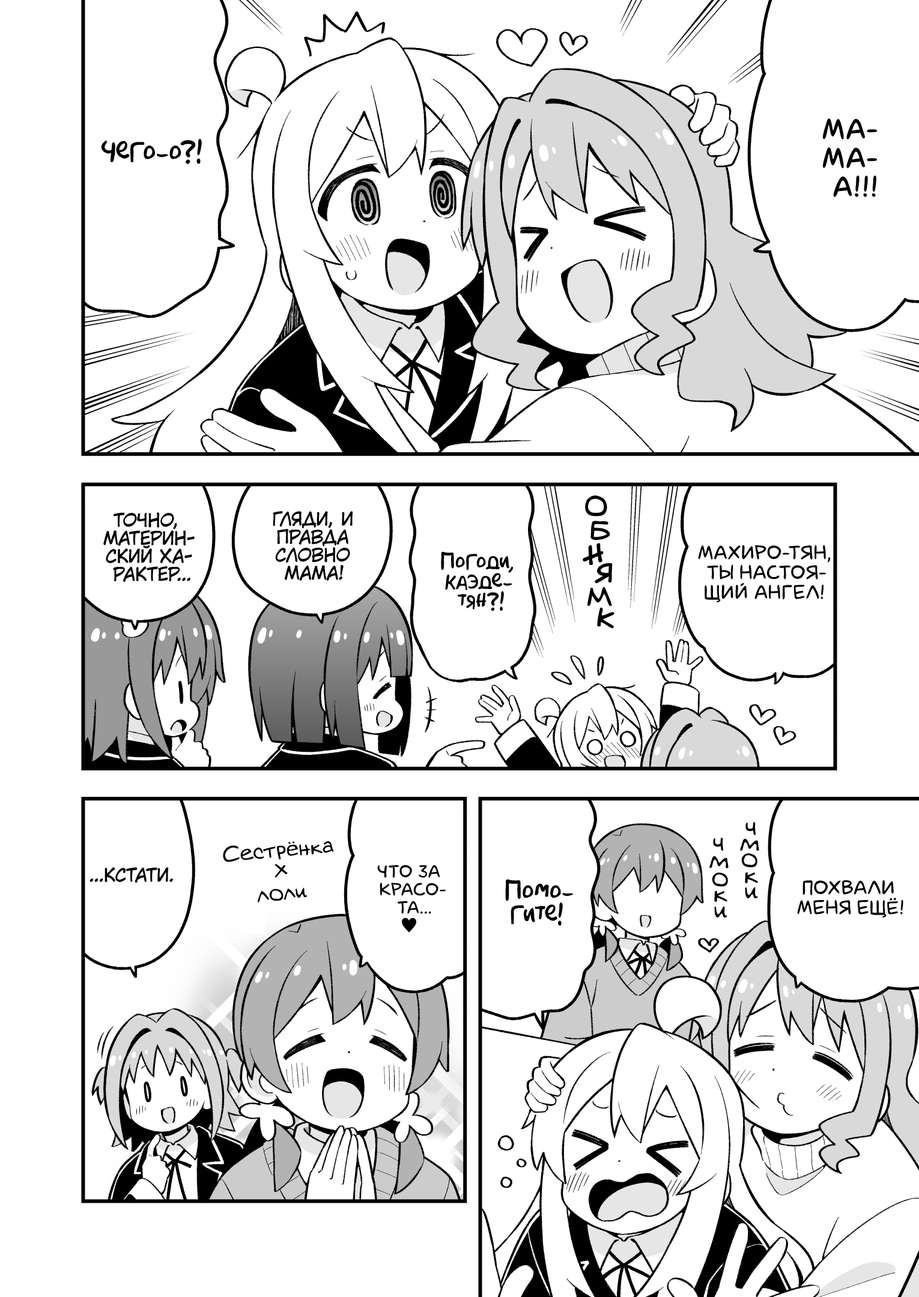
<style>
.page{position:relative;width:919px;height:1297px;background:#ffffff}
.page>*{position:absolute;margin:0}
.t1{font:28.8px "laCartoonerie";color:#000000;text-transform:uppercase;font-weight:bold}
.t2{font:25.2px "AkbarPlain";color:#000000}
.t3{font:25.2px "v_Augie";color:#000000;text-transform:uppercase}
.t4{font:18px "KuraiVoice2";color:#000000;text-transform:uppercase}
.t5{font:24px "v_Augie";color:#000000;text-transform:uppercase}
.t6{font:25.8px "v_Augie";color:#000000;text-transform:uppercase}
.t7{font:19.8px "laCartoonerie";color:#000000;text-transform:uppercase}
.t8{font:19.8px "AkbarPlain";color:#000000}
.t9{font:26.4px "v_Augie";color:#000000;text-transform:uppercase}
.t10{font:25.2px "v_Augie";color:#000000}
.t11{font:21.6px "v_Augie";color:#000000}
.t12{font:18px "laCartoonerie";color:#000000;text-transform:uppercase}
.t13{font:18px "KozGoPr6N-Regular";color:#000000;text-transform:uppercase}
.t14{font:23.4px "AkbarPlain";color:#000000}
</style>
<div class="page">
<p class="t1" style="left:823px;top:118px;width:54px;height:79px;text-align:center">Ма-<br>ма-<br>а!!!</p>
<p class="t2" style="left:101px;top:139px;width:101px;height:26px">Чего-о?!</p>
<p class="t3" style="left:586px;top:496px;width:21px;height:20px">о</p>
<p class="t4" style="left:103px;top:512px;width:92px;height:70px;text-align:center">Точно,<br>материн-<br>ский ха-<br>рактер...</p>
<p class="t4" style="left:273px;top:511px;width:80px;height:70px;text-align:center">Гляди, и<br>правда<br>словно<br>мама!</p>
<p class="t5" style="left:591px;top:521px;width:19px;height:19px;rotate:4deg">б</p>
<p class="t6" style="left:583px;top:544px;width:20px;height:21px;rotate:-6deg">н</p>
<p class="t7" style="left:698px;top:545px;width:133px;height:57px;text-align:center">Махиро-тян,<br>ты настоя-<br>щий ангел!</p>
<p class="t8" style="left:441px;top:552px;width:72px;height:59px;text-align:center">Погоди,<br>Каэде-<br>тян?!</p>
<p class="t9" style="left:595px;top:563px;width:17px;height:20px;rotate:5deg">я</p>
<p class="t3" style="left:588px;top:587px;width:23px;height:19px;rotate:-5deg">м</p>
<p class="t5" style="left:598px;top:608px;width:16px;height:20px;rotate:8deg">к</p>
<p class="t10" style="left:745px;top:822px;width:11px;height:14px">ч</p>
<p class="t11" style="left:223px;top:842px;width:111px;height:61px;text-align:center;rotate:-5deg">Сестрёнка<br>×<br>лоли</p>
<p class="t10" style="left:713px;top:838px;width:10px;height:13px">ч</p>
<p class="t10" style="left:740px;top:839px;width:19px;height:12px">м</p>
<p class="t10" style="left:709px;top:856px;width:20px;height:13px">м</p>
<p class="t10" style="left:741px;top:854px;width:16px;height:14px">о</p>
<p class="t4" style="left:90px;top:867px;width:83px;height:16px">...Кстати.</p>
<p class="t12" style="left:377px;top:865px;width:69px;height:68px;text-align:center">Что за<br>красо-<br>та...<br><span class="t13">♥</span></p>
<p class="t14" style="left:505px;top:879px;width:69px;height:47px;text-align:center">Помо-<br>гите!</p>
<p class="t10" style="left:712px;top:873px;width:16px;height:14px">о</p>
<p class="t10" style="left:745px;top:872px;width:13px;height:12px">к</p>
<p class="t7" style="left:797px;top:881px;width:106px;height:37px;text-align:center">Похвали<br>меня ещё!</p>
<p class="t10" style="left:714px;top:891px;width:13px;height:11px">к</p>
<p class="t10" style="left:745px;top:887px;width:13px;height:12px">и</p>
<p class="t10" style="left:714px;top:906px;width:13px;height:12px">и</p>
</div>
